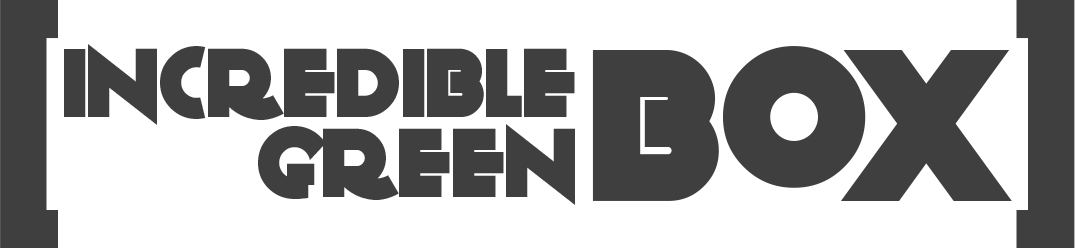
<style>
.page{position:relative;width:1075px;height:249px;background:#ffffff}
.page>*{position:absolute;margin:0}
.t1{font:314.1px "Impact";color:#3f3f3f;scale:0.82 1}
.t2{font:100px "KiloGram";color:#3f3f3f}
.t3{font:221.1px "KiloGram";color:#3f3f3f}
</style>
<div class="page">
<p class="t1" style="left:0px;top:0px;width:58px;height:248px;rotate:180deg">[</p>
<p class="t1" style="left:1016px;top:0px;width:59px;height:248px">[</p>
<p class="t2" style="left:64px;top:44px;width:511px;height:81px">incredible</p>
<p class="t3" style="left:592px;top:46px;width:420px;height:155px">box</p>
<p class="t2" style="left:258px;top:124px;width:317px;height:81px">green</p>
</div>
